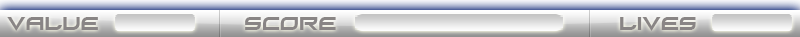
<style>
.page{position:relative;width:800px;height:37px}
.page>*{position:absolute;margin:0}
.t1{font:17px "Xirod";color:#898585}
</style>
<div class="page">
<p class="t1" style="left:7px;top:17px;width:91px;height:14px">VALUE</p>
<p class="t1" style="left:245px;top:17px;width:91px;height:13px">SCORE</p>
<p class="t1" style="left:620px;top:17px;width:76px;height:14px">LIVES</p>
</div>
